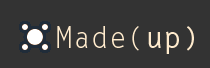
<style>
.page{position:relative;width:210px;height:68px;background:#333333}
.page>*{position:absolute;margin:0}
.t1{font:30px "LetterGothicStd";color:#ffebcd}
.t2{font:30px "LetterGothicStd-Bold";color:#ffebcd}
</style>
<div class="page">
<p class="t1" style="left:57px;top:26px;width:137px;height:28px">Made(<span class="t2">up)</span></p>
</div>
